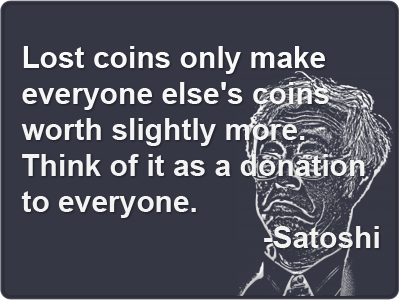
<style>
.page{position:relative;width:400px;height:300px;background:#353744}
.page>*{position:absolute;margin:0}
.t1{font:30px "Arial-BoldMT";color:#f4f4f4}
</style>
<div class="page">
<p class="t1" style="left:21px;top:46px;width:358px;height:202px">Lost coins only make<br>everyone else's coins<br>worth slightly more. <br>Think of it as a donation<br>to everyone.<br>         -Satoshi</p>
</div>
